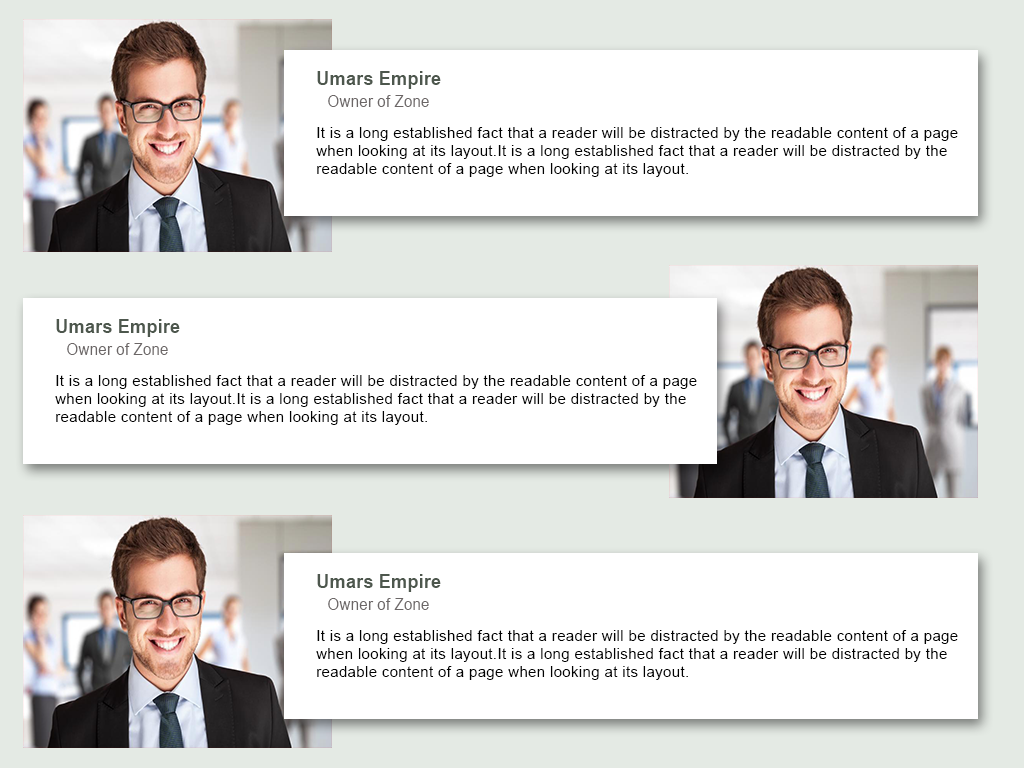
<style>
.page{position:relative;width:1024px;height:768px;background:#ffffff}
.page>*{position:absolute;margin:0}
.t1{font:19.2px "Arial-BoldMT";color:#4d574d;scale:0.96 1}
.t2{font:16.1px "ArialMT";color:#6b6666;scale:0.96 1}
.t3{font:14.9px "ArialMT";letter-spacing:0.025em;color:#010101}
</style>
<div class="page">
<p class="t1" style="left:317px;top:71px;width:124px;height:18px">Umars Empire</p>
<p class="t2" style="left:328px;top:95px;width:101px;height:12px">Owner of Zone</p>
<p class="t3" style="left:316px;top:127px;width:642px;height:50px">It is a long established fact that a reader will be distracted by the readable content of a page<br>when looking at its layout.It is a long established fact that a reader will be distracted by the<br>readable content of a page when looking at its layout.</p>
<p class="t1" style="left:56px;top:319px;width:124px;height:18px">Umars Empire</p>
<p class="t2" style="left:67px;top:343px;width:101px;height:12px">Owner of Zone</p>
<p class="t3" style="left:55px;top:375px;width:642px;height:50px">It is a long established fact that a reader will be distracted by the readable content of a page<br>when looking at its layout.It is a long established fact that a reader will be distracted by the<br>readable content of a page when looking at its layout.</p>
<p class="t1" style="left:317px;top:574px;width:124px;height:18px">Umars Empire</p>
<p class="t2" style="left:328px;top:598px;width:101px;height:12px">Owner of Zone</p>
<p class="t3" style="left:316px;top:630px;width:642px;height:50px">It is a long established fact that a reader will be distracted by the readable content of a page<br>when looking at its layout.It is a long established fact that a reader will be distracted by the<br>readable content of a page when looking at its layout.</p>
</div>
